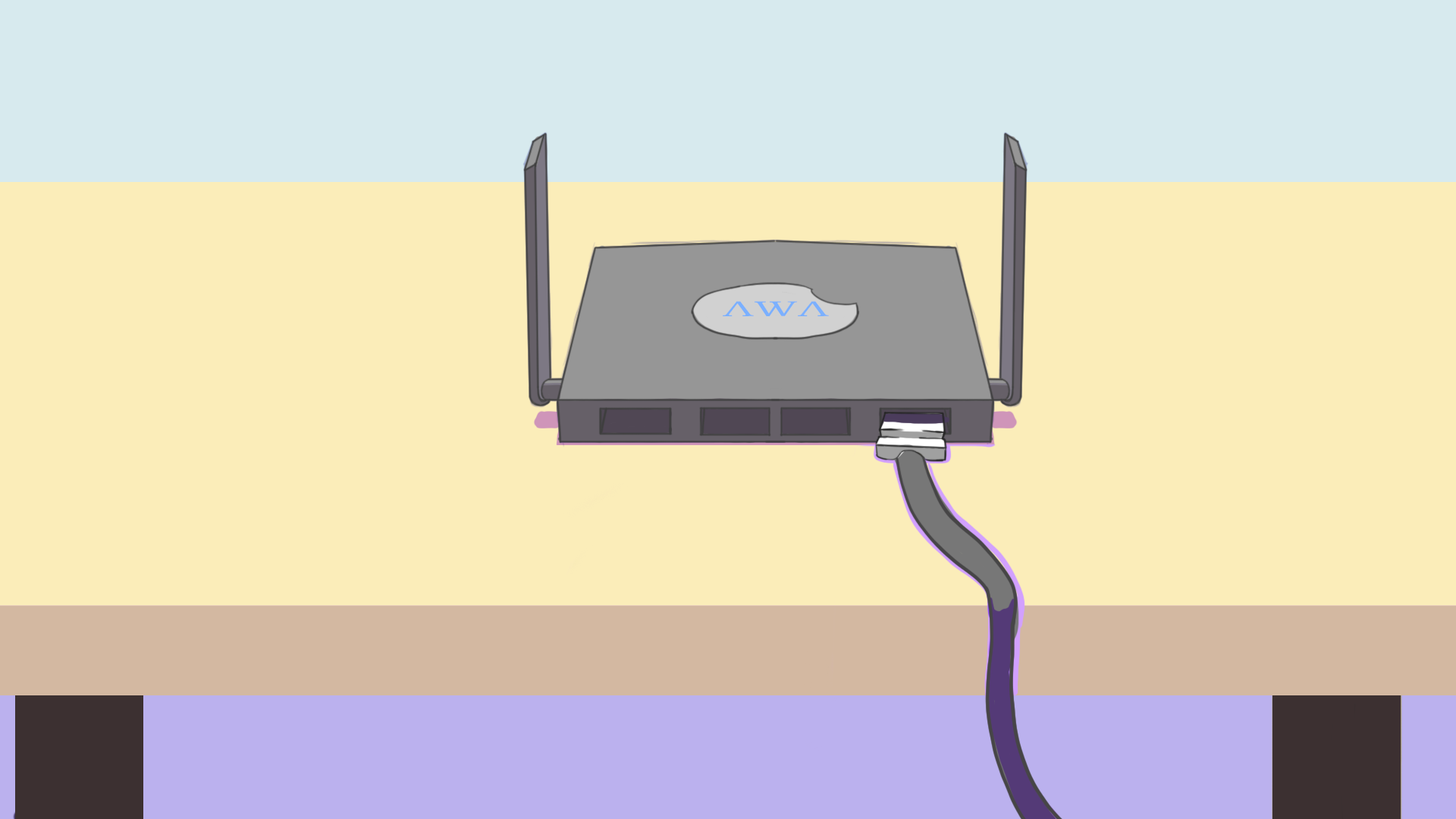
<style>
.page{position:relative;width:1456px;height:819px;background:#fbedb9}
.page>*{position:absolute;margin:0}
.t1{font:21.5px "BookmanOldStyle";color:#7bb0ff;scale:2.11 1}
</style>
<div class="page">
<p class="t1" style="left:723px;top:301px;width:106px;height:15px">ЛWЛ</p>
</div>
